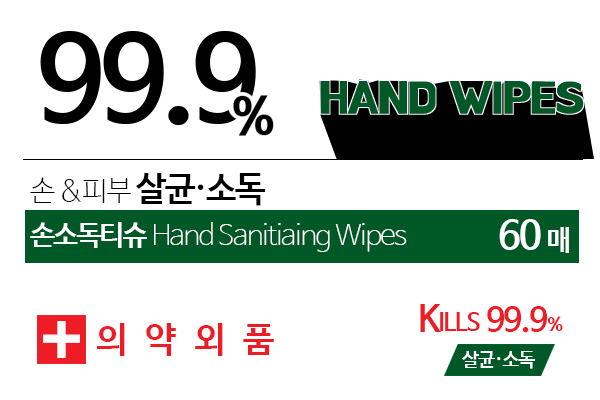
<style>
.page{position:relative;width:600px;height:400px;background:#ffffff}
.page>*{position:absolute;margin:0}
.t1{font:44px "BMHANNAPro";letter-spacing:-0.05em;color:#005826;text-transform:uppercase;font-weight:bold}
.t2{font:28.9px "NanumBarunGothicUltraLight";letter-spacing:-0.05em;color:#000000}
.t3{font:34.7px "NanumBarunGothicBold";letter-spacing:-0.05em;color:#000000}
.t4{font:27.9px "NanumBarunGothicUltraLight";letter-spacing:-0.05em;color:#ffffff}
.t5{font:27.9px "NanumBarunGothicBold";letter-spacing:-0.05em;color:#ffffff}
.t6{font:38.7px "NanumBarunGothicBold";letter-spacing:-0.05em;color:#ffffff}
.t7{font:27.6px "NanumBarunGothicBold";letter-spacing:0.05em;color:#ffffff}
.t8{font:24.1px "NanumBarunGothicBold";letter-spacing:-0.05em;color:#ee1c25}
.t9{font:35.5px "NanumBarunGothicBold";letter-spacing:-0.05em;color:#ee1c25}
.t10{font:32.7px "NanumBarunGothicBold";letter-spacing:-0.05em;color:#ee1c25}
.t11{font:18.4px "NanumBarunGothicBold";letter-spacing:-0.05em;color:#ee1c25}
.t12{font:36.4px "NanumBarunGothicBold";letter-spacing:0.5em;color:#ee1c25;scale:0.97 1}
.t13{font:20.2px "NanumBarunGothicBold";letter-spacing:-0.05em;color:#ffffff;scale:0.95 1}
</style>
<div class="page">
<p class="t1" style="left:320px;top:81px;width:264px;height:33px">Hand Wipes</p>
<p class="t2" style="left:30px;top:173px;width:235px;height:33px">손 &amp;피부<span class="t3"> 살균·소독</span></p>
<p class="t4" style="left:30px;top:222px;width:377px;height:30px"><span class="t5">손소독티슈 </span>Hand Sanitiaing Wipes</p>
<p class="t6" style="left:499px;top:219px;width:70px;height:34px">60 <span class="t7">매</span></p>
<p class="t8" style="left:420px;top:304px;width:143px;height:29px"><span class="t9">K</span>ILLS <span class="t10">99.9</span><span class="t11">%</span></p>
<p class="t12" style="left:97px;top:323px;width:177px;height:33px">의약외품</p>
<p class="t13" style="left:462px;top:351px;width:73px;height:18px">살균·소독</p>
</div>
